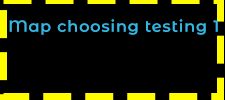
<style>
.page{position:relative;width:225px;height:100px;background:#000000}
.page>*{position:absolute;margin:0}
.t1{font:16px "MontserratAlternates-SemiBold";letter-spacing:0.05em;color:#35b6e1}
</style>
<div class="page">
<p class="t1" style="left:9px;top:19px;width:209px;height:16px">Map choosing testing 1</p>
</div>
